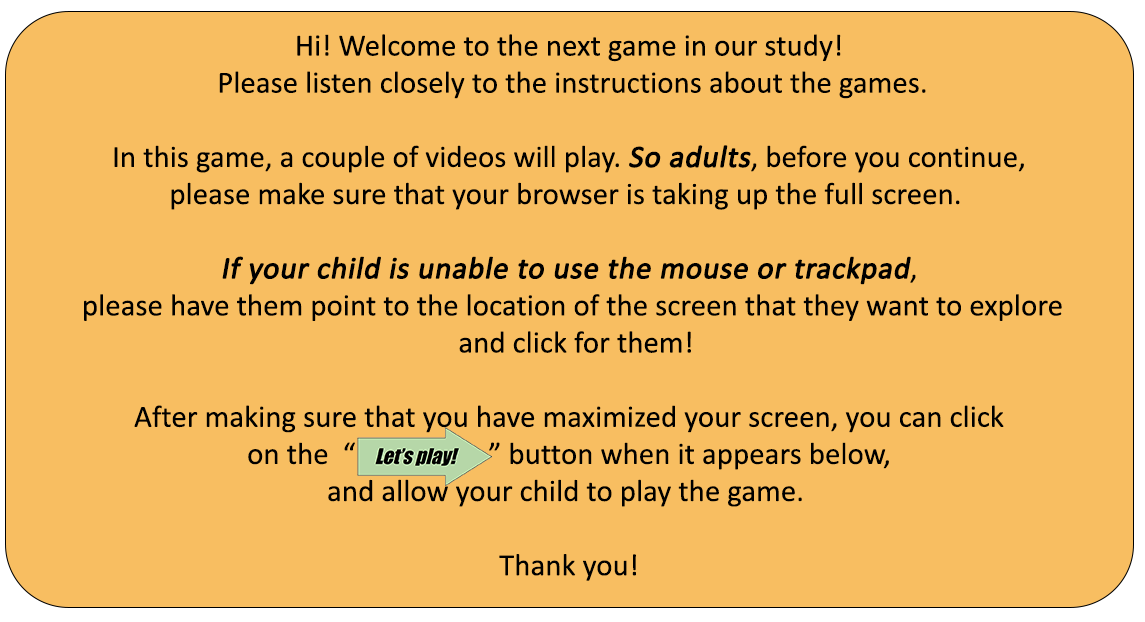
<style>
.page{position:relative;width:1145px;height:622px;background:#f8be61}
.page>*{position:absolute;margin:0}
.t1{font:30.9px "Calibri";color:#000000}
.t2{font:30.9px "Calibri";color:#000000;font-weight:bold;font-style:italic}
</style>
<div class="page">
<p class="t1" style="left:84px;top:34px;width:978px;height:547px;text-align:center">Hi! Welcome to the next game in our study! <br>Please listen closely to the instructions about the games.<br><br>In this game, a couple of videos will play. <span class="t2">So adults</span>, before you continue, <br>please make sure that your browser is taking up the full screen.  <br><br><span class="t2">If your child is unable to use the mouse or trackpad</span>, <br>please have them point to the location of the screen that they want to explore<br> and click for them!<br><br>After making sure that you have maximized your screen, you can click <br>on the  “                   ” button when it appears below, <br>and allow your child to play the game.  <br><br>Thank you!</p>
</div>
